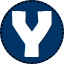
<style>
.page{position:relative;width:64px;height:64px;background:#003366}
.page>*{position:absolute;margin:0}
.t1{font:66.7px "BerlinSansFBDemi-Bold";color:#ffffff}
</style>
<div class="page">
<p class="t1" style="left:12px;top:11px;width:40px;height:46px">Y</p>
</div>
